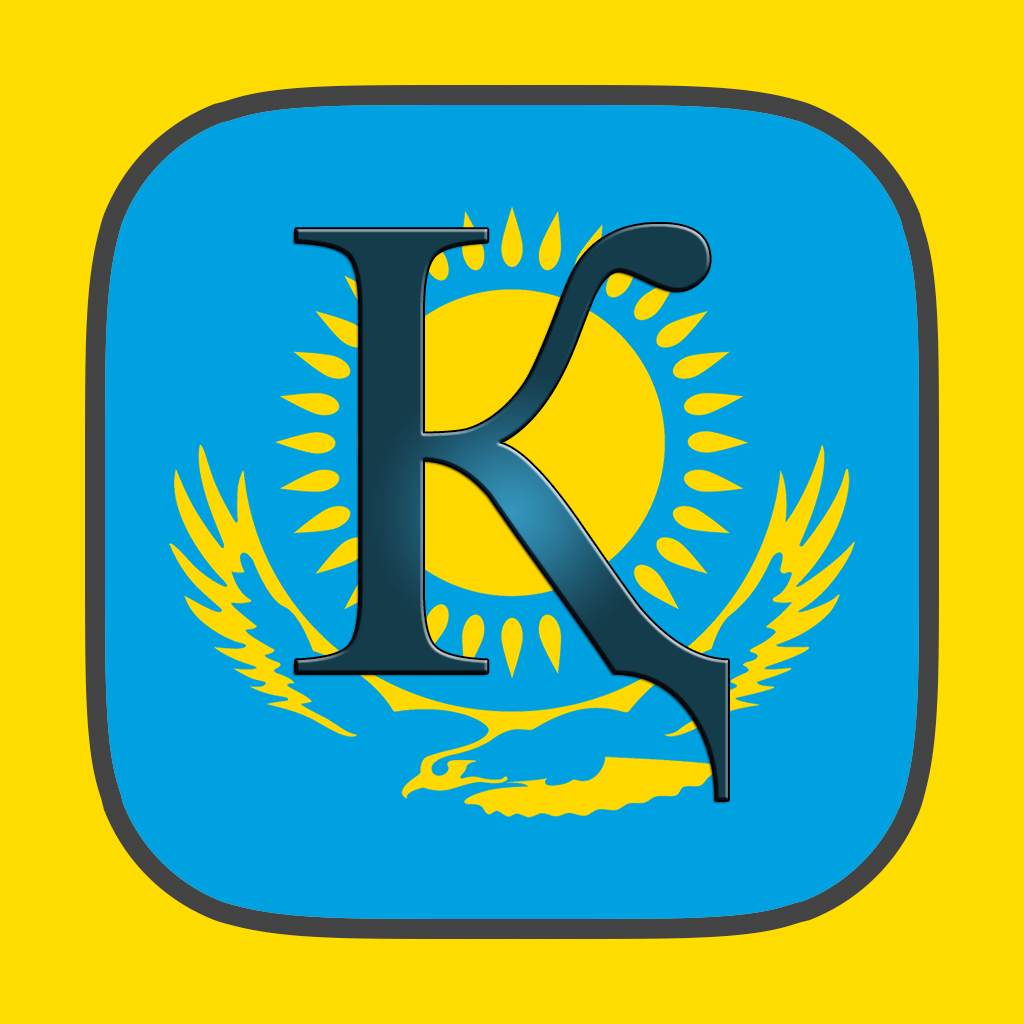
<style>
.page{position:relative;width:1024px;height:1024px;background:#00a1e1}
.page>*{position:absolute;margin:0}
.t1{font:688.1px "UKIJMoyQelem";color:#153c4b}
</style>
<div class="page">
<p class="t1" style="left:296px;top:224px;width:432px;height:576px">Қ</p>
</div>
